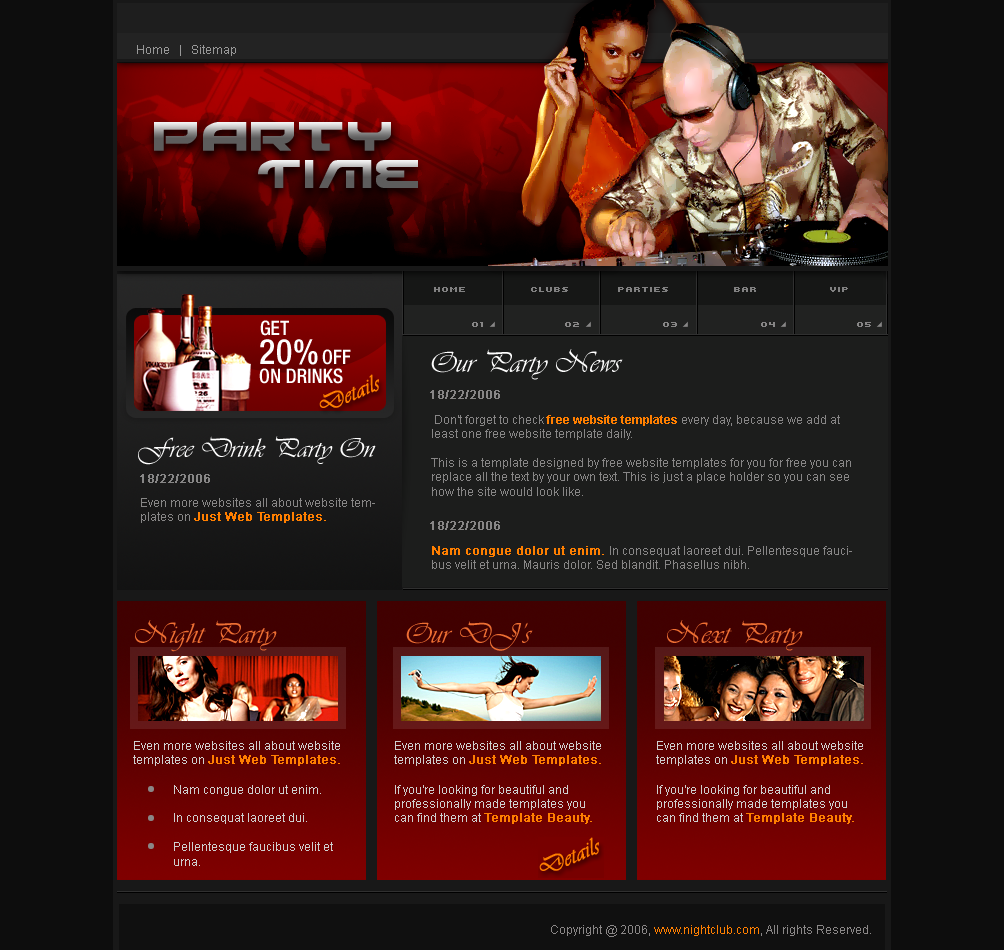
<style>
.page{position:relative;width:1004px;height:950px;background:#0d0d0d}
.page>*{position:absolute;margin:0}
.t1{font:12px "ArialMT";color:#989898}
.t2{font:8px "Kroeger0564";color:#818181;text-transform:uppercase}
.t3{font:20px "HelveticaNeue-MediumCond";letter-spacing:-0.01em;color:#ffffff}
.t4{font:8px "Kroeger0564";color:#878686;text-transform:uppercase}
.t5{font:35px "HelveticaNeue-MediumCond";color:#ffffff}
.t6{font:30px "Vivaldii";color:#ffffff}
.t7{font:24px "Vivaldii";color:#ff7f00;font-weight:bold}
.t8{font:12px "ArialMT";color:#878686;font-weight:bold}
.t9{font:12px "ArialMT";color:#878686}
.t10{font:12px "Arial-BoldMT";color:#ff7f00}
.t11{font:28px "Vivaldii";color:#ffffff}
.t12{font:12px "ArialMT";color:#ff7f00;font-weight:bold}
.t13{font:30px "Vivaldii";color:#ee6f33}
.t14{font:12px "ArialMT";color:#cfcfcf}
.t15{font:12px "ArialMT";color:#8a8787}
.t16{font:12px "ArialMT";color:#ff7f00}
</style>
<div class="page">
<p class="t1" style="left:137px;top:45px;width:99px;height:11px">Home   |   Sitemap</p>
<p class="t2" style="left:434px;top:287px;width:414px;height:5px">HOME                Clubs            Parties                Bar                  VIP</p>
<p class="t3" style="left:260px;top:320px;width:29px;height:16px">GET</p>
<p class="t4" style="left:472px;top:322px;width:11px;height:5px">01</p>
<p class="t4" style="left:565px;top:322px;width:14px;height:5px">02</p>
<p class="t4" style="left:663px;top:322px;width:14px;height:5px">03</p>
<p class="t4" style="left:761px;top:322px;width:14px;height:5px">04</p>
<p class="t4" style="left:857px;top:322px;width:14px;height:5px">05</p>
<p class="t5" style="left:260px;top:339px;width:58px;height:26px">20%</p>
<p class="t3" style="left:322px;top:349px;width:29px;height:16px">OFF</p>
<p class="t6" style="left:431px;top:349px;width:192px;height:31px">Our Party News</p>
<p class="t3" style="left:259px;top:368px;width:84px;height:16px">ON DRINKS</p>
<p class="t7" style="left:319px;top:374px;width:60px;height:34px;rotate:-23deg">Details</p>
<p class="t8" style="left:430px;top:390px;width:70px;height:9px">18/22/2006</p>
<p class="t9" style="left:431px;top:415px;width:420px;height:81px">Don't forget to check <span class="t10">free website templates</span> every day, because we add at least one free website template daily.<br><br>This is a template designed by free website templates for you for free you can replace all the text by your own text. This is just a place holder so you can see how the site would look like.</p>
<p class="t11" style="left:138px;top:436px;width:238px;height:29px">Free Drink Party On</p>
<p class="t8" style="left:140px;top:474px;width:70px;height:9px">18/22/2006</p>
<p class="t9" style="left:141px;top:498px;width:234px;height:25px">Even more websites all about website templates on <span class="t12">Just Web Templates.</span></p>
<p class="t8" style="left:430px;top:521px;width:70px;height:9px">18/22/2006</p>
<p class="t9" style="left:432px;top:546px;width:420px;height:23px"><span class="t12">Nam congue dolor ut enim. </span>In consequat laoreet dui. Pellentesque faucibus velit et urna. Mauris dolor. Sed blandit. Phasellus nibh.</p>
<p class="t13" style="left:135px;top:620px;width:142px;height:32px">Night Party</p>
<p class="t13" style="left:406px;top:621px;width:127px;height:30px">Our DJ’s</p>
<p class="t13" style="left:667px;top:620px;width:136px;height:31px">Next Party</p>
<p class="t14" style="left:133px;top:741px;width:207px;height:25px">Even more websites all about website templates on <span class="t12">Just Web Templates.</span></p>
<p class="t14" style="left:394px;top:741px;width:207px;height:25px">Even more websites all about website templates on <span class="t12">Just Web Templates.</span></p>
<p class="t14" style="left:656px;top:741px;width:207px;height:25px">Even more websites all about website templates on <span class="t12">Just Web Templates.</span></p>
<p class="t14" style="left:174px;top:785px;width:159px;height:81px">Nam congue dolor ut enim. <br><br>In consequat laoreet dui. <br><br>Pellentesque faucibus velit et urna.</p>
<p class="t14" style="left:395px;top:785px;width:197px;height:39px">If you're looking for beautiful and professionally made templates you can find them at <span class="t12">Template Beauty.</span></p>
<p class="t14" style="left:657px;top:785px;width:197px;height:39px">If you're looking for beautiful and professionally made templates you can find them at <span class="t12">Template Beauty.</span></p>
<p class="t7" style="left:539px;top:837px;width:60px;height:34px;rotate:-23deg">Details</p>
<p class="t15" style="left:551px;top:925px;width:320px;height:12px">Copyright @ 2006, <span class="t16">www.nightclub.com</span>, All rights Reserved.</p>
</div>
